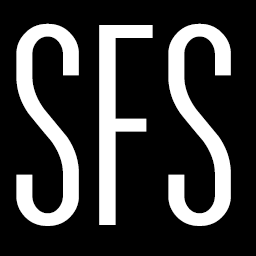
<style>
.page{position:relative;width:256px;height:256px;background:#000000}
.page>*{position:absolute;margin:0}
.t1{font:299.3px "SFMoviePosterCondensed";color:#ffffff;font-weight:bold;scale:1.55 1}
</style>
<div class="page">
<p class="t1" style="left:16px;top:23px;width:215px;height:203px">SFS</p>
</div>
